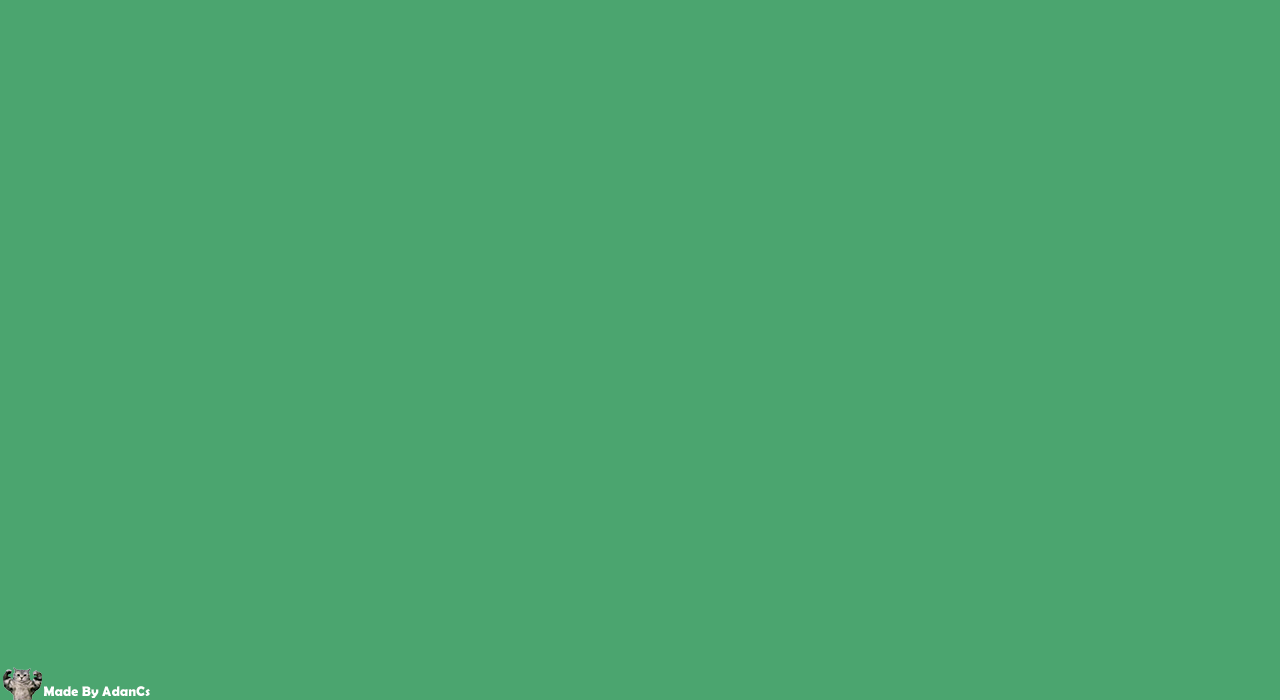
<style>
.page{position:relative;width:1280px;height:700px;background:#4ba56f}
.page>*{position:absolute;margin:0}
.t1{font:13.8px "BerlinSansFBDemi-Bold";letter-spacing:0.01em;color:#ffffff}
</style>
<div class="page">
<p class="t1" style="left:44px;top:686px;width:106px;height:12px">Made By AdanCs</p>
</div>
